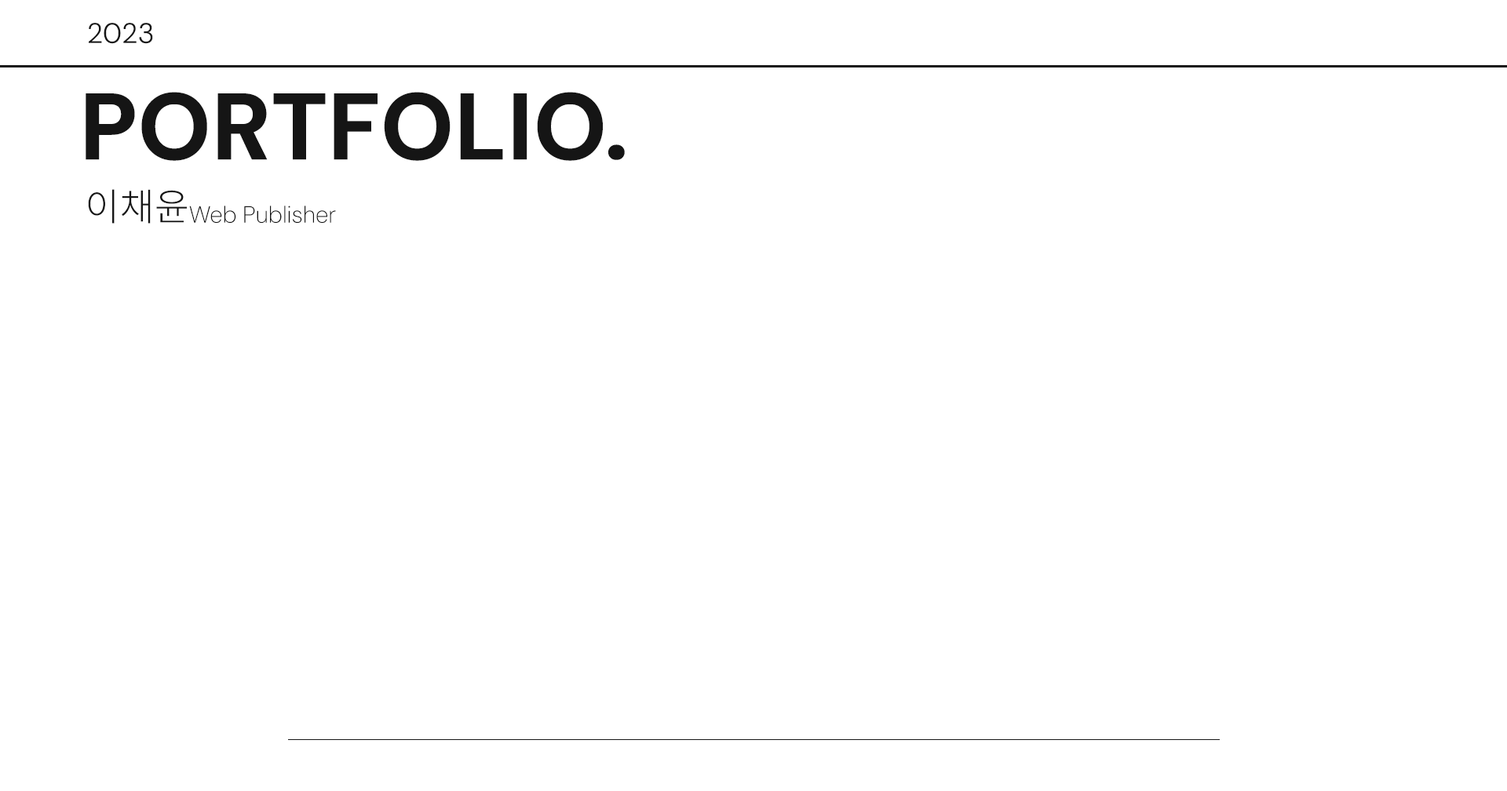
<style>
.page{position:relative;width:1507px;height:791px;background:#ffffff}
.page>*{position:absolute;margin:0}
.t1{font:28.3px "DMSans-Light";color:#151515}
.t2{font:94.2px "DMSans-ExtraBold";color:#151515}
.t3{font:37.7px "NotoSansKR-Light";color:#151515}
.t4{font:23.5px "DMSans-ExtraLight";color:#151515}
</style>
<div class="page">
<p class="t1" style="left:89px;top:23px;width:64px;height:21px">2023</p>
<p class="t2" style="left:86px;top:92px;width:539px;height:69px">PORTFOLIO.</p>
<p class="t3" style="left:88px;top:189px;width:99px;height:35px">이채윤</p>
<p class="t4" style="left:189px;top:206px;width:147px;height:17px">Web Publisher</p>
</div>
